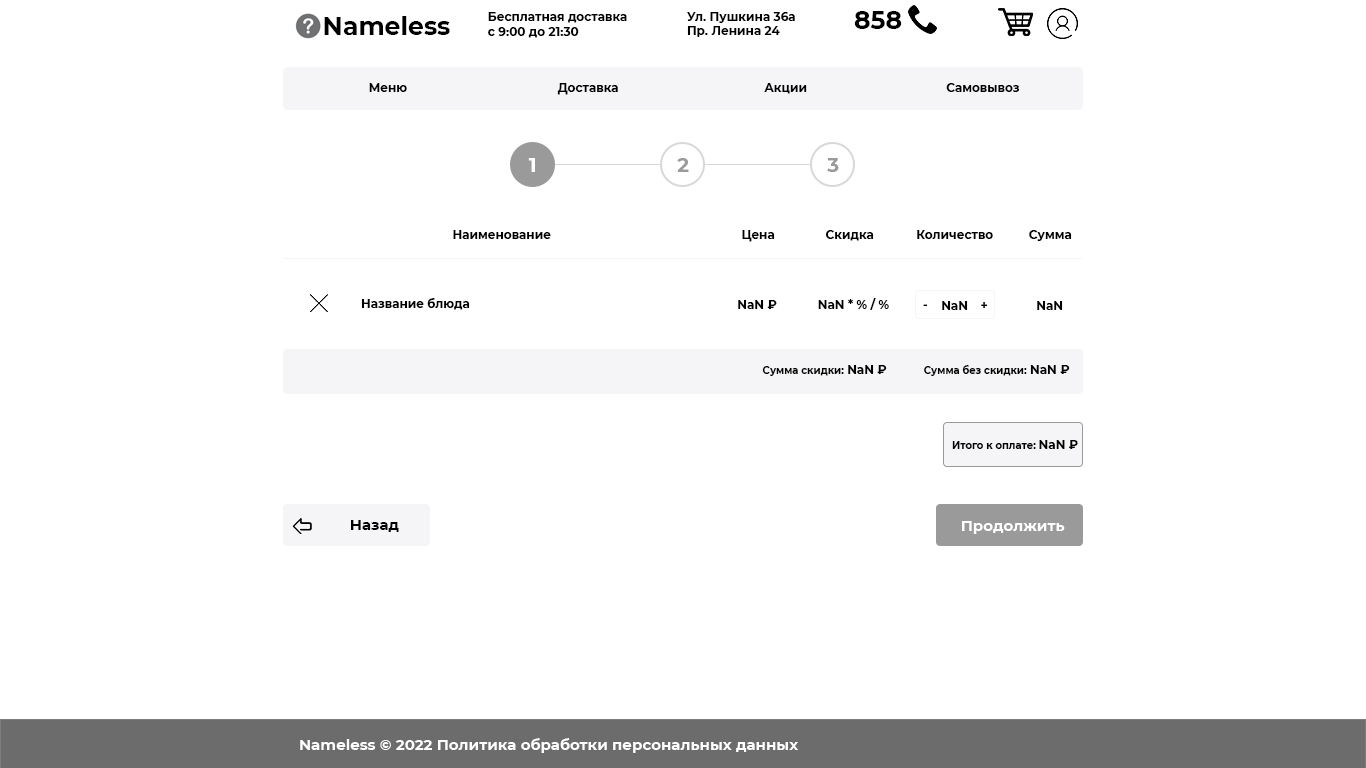
<style>
.page{position:relative;width:1366px;height:768px;background:#ffffff}
.page>*{position:absolute;margin:0}
.t1{font:25px "Montserrat-Bold";color:#000000}
.t2{font:12px "Montserrat-Bold";color:#000000}
.t3{font:20px "Montserrat-Bold";color:#ffffff}
.t4{font:20px "Montserrat-Bold";color:#9a9a9a}
.t5{font:10px "Montserrat-Bold";color:#000000}
.t6{font:15px "Montserrat-Bold";color:#000000}
.t7{font:15px "Montserrat-Bold";color:#ffffff}
</style>
<div class="page">
<p class="t1" style="left:324px;top:16px;width:126px;height:19px">Nameless</p>
<p class="t2" style="left:488px;top:12px;width:139px;height:26px">Бесплатная доставка<br>с 9:00 до 21:30</p>
<p class="t2" style="left:687px;top:12px;width:108px;height:25px">Ул. Пушкина 36а<br>Пр. Ленина 24</p>
<p class="t1" style="left:854px;top:11px;width:48px;height:18px">858</p>
<p class="t2" style="left:369px;top:83px;width:38px;height:9px">Меню</p>
<p class="t2" style="left:369px;top:83px;width:38px;height:9px">Меню</p>
<p class="t2" style="left:557px;top:83px;width:61px;height:12px">Доставка</p>
<p class="t2" style="left:557px;top:83px;width:61px;height:12px">Доставка</p>
<p class="t2" style="left:764px;top:83px;width:43px;height:11px">Акции</p>
<p class="t2" style="left:764px;top:83px;width:43px;height:11px">Акции</p>
<p class="t2" style="left:946px;top:83px;width:74px;height:9px">Самовывоз</p>
<p class="t2" style="left:946px;top:83px;width:74px;height:9px">Самовывоз</p>
<p class="t3" style="left:528px;top:158px;width:7px;height:14px">1</p>
<p class="t4" style="left:677px;top:158px;width:12px;height:14px">2</p>
<p class="t4" style="left:827px;top:158px;width:12px;height:14px">3</p>
<p class="t2" style="left:453px;top:230px;width:98px;height:9px">Наименование</p>
<p class="t2" style="left:742px;top:230px;width:33px;height:12px">Цена</p>
<p class="t2" style="left:825px;top:230px;width:49px;height:11px">Скидка</p>
<p class="t2" style="left:917px;top:230px;width:76px;height:9px">Количество</p>
<p class="t2" style="left:1029px;top:230px;width:43px;height:11px">Сумма</p>
<p class="t2" style="left:361px;top:298px;width:109px;height:12px">Название блюда</p>
<p class="t2" style="left:738px;top:300px;width:39px;height:9px">NaN ₽</p>
<p class="t2" style="left:818px;top:298px;width:71px;height:12px">NaN * % / %</p>
<p class="t2" style="left:923px;top:304px;width:5px;height:2px">-</p>
<p class="t2" style="left:942px;top:301px;width:26px;height:9px">NaN</p>
<p class="t2" style="left:981px;top:302px;width:7px;height:6px">+</p>
<p class="t2" style="left:1037px;top:301px;width:26px;height:9px">NaN</p>
<p class="t5" style="left:762px;top:365px;width:125px;height:11px">Сумма скидки:<span class="t2"> NaN ₽</span></p>
<p class="t5" style="left:924px;top:365px;width:146px;height:11px">Сумма без скидки:<span class="t2"> NaN ₽</span></p>
<p class="t5" style="left:952px;top:440px;width:126px;height:9px">Итого к оплате: <span class="t2">NaN ₽</span></p>
<p class="t6" style="left:351px;top:520px;width:48px;height:12px">Назад</p>
<p class="t7" style="left:962px;top:521px;width:103px;height:13px">Продолжить</p>
<p class="t7" style="left:300px;top:738px;width:499px;height:15px">Nameless © 2022 Политика обработки персональных данных</p>
</div>
